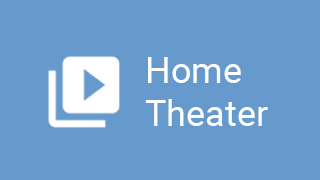
<style>
.page{position:relative;width:320px;height:180px;background:#6699cc}
.page>*{position:absolute;margin:0}
.t1{font:36px "Roboto-Regular";color:#ffffff}
</style>
<div class="page">
<p class="t1" style="left:145px;top:57px;width:123px;height:69px">Home <br>Theater</p>
</div>
